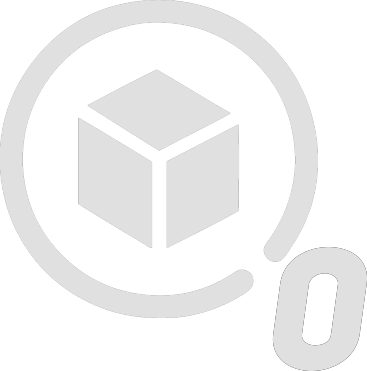
<style>
.page{position:relative;width:367px;height:371px;background:#ffffff}
.page>*{position:absolute;margin:0}
.t1{font:168.9px "UniSansHeavyCapsItalic";color:#e0e0e0}
</style>
<div class="page">
<p class="t1" style="left:272px;top:247px;width:96px;height:125px">0</p>
</div>
